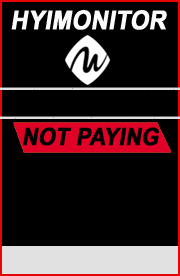
<style>
.page{position:relative;width:180px;height:276px;background:#000000}
.page>*{position:absolute;margin:0}
.t1{font:26px "Arial-BoldMT";color:#fbfbfb;font-weight:bold;font-style:italic;scale:0.9 1}
.t2{font:24px "Arial-BoldMT";color:#010101;font-weight:bold;font-style:italic;scale:0.9 1}
</style>
<div class="page">
<p class="t1" style="left:11px;top:10px;width:156px;height:20px">HYIMONITOR</p>
<p class="t2" style="left:23px;top:127px;width:136px;height:19px">NOT PAYING</p>
</div>
